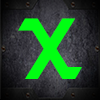
<style>
.page{position:relative;width:100px;height:100px}
.page>*{position:absolute;margin:0}
.t1{font:93px "CYBERTOOTH";letter-spacing:0.22em;color:#00ff12}
</style>
<div class="page">
<p class="t1" style="left:18px;top:18px;width:64px;height:61px">X</p>
</div>
